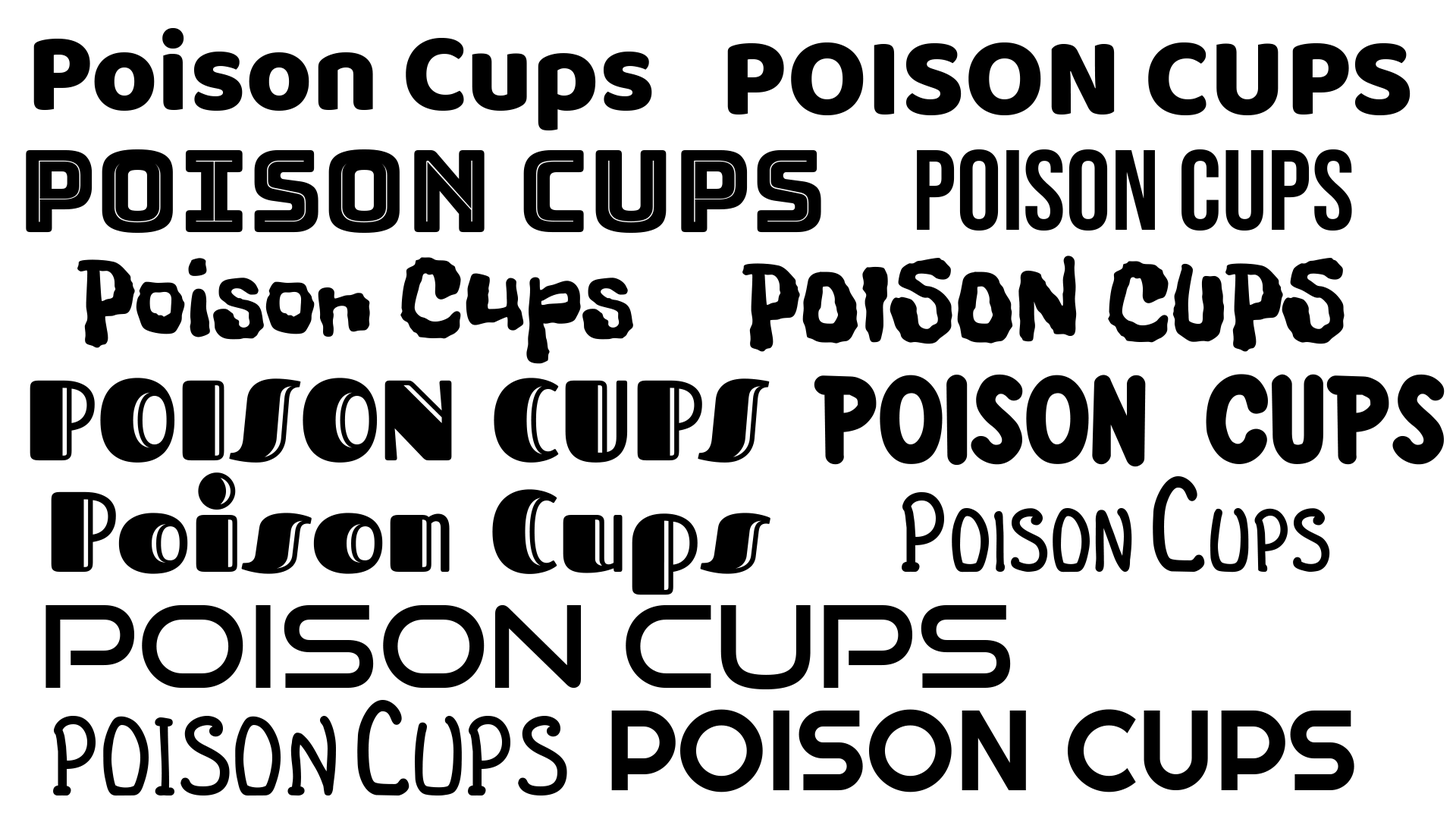
<style>
.page{position:relative;width:1456px;height:819px;background:#ffffff}
.page>*{position:absolute;margin:0}
.t1{font:113.7px "Baloo-Regular";color:#000000}
.t2{font:113.7px "BungeeInline-Regular";color:#000000}
.t3{font:113.7px "BebasNeue-Regular";color:#000000}
.t4{font:113.7px "FreckleFace-Regular";color:#000000}
.t5{font:113.7px "FascinateInline-Regular";color:#000000}
.t6{font:113.7px "KirbyClassic";color:#000000}
.t7{font:113.7px "RepriseChordsStd";color:#000000}
.t8{font:113.7px "GoodTimesRg-Regular";color:#000000}
.t9{font:113.7px "Righteous-Regular";color:#000000}
</style>
<div class="page">
<p class="t1" style="left:33px;top:28px;width:619px;height:102px">Poison Cups</p>
<p class="t1" style="left:727px;top:42px;width:683px;height:73px">POISON CUPS</p>
<p class="t2" style="left:26px;top:149px;width:795px;height:84px">Poison Cups</p>
<p class="t3" style="left:917px;top:149px;width:435px;height:82px">POISON CUPS</p>
<p class="t4" style="left:77px;top:257px;width:556px;height:107px">Poison Cups</p>
<p class="t4" style="left:742px;top:256px;width:603px;height:96px">POISON CUPS</p>
<p class="t5" style="left:30px;top:378px;width:740px;height:85px">POISON CUPS</p>
<p class="t6" style="left:814px;top:374px;width:631px;height:93px">POISON CUPS</p>
<p class="t5" style="left:51px;top:472px;width:719px;height:123px">Poison Cups</p>
<p class="t7" style="left:902px;top:476px;width:428px;height:97px">Poison Cups</p>
<p class="t8" style="left:45px;top:605px;width:966px;height:84px">Poison Cups</p>
<p class="t7" style="left:53px;top:700px;width:514px;height:96px">POISON CUPS</p>
<p class="t9" style="left:611px;top:709px;width:743px;height:83px">POISON CUPS</p>
</div>
